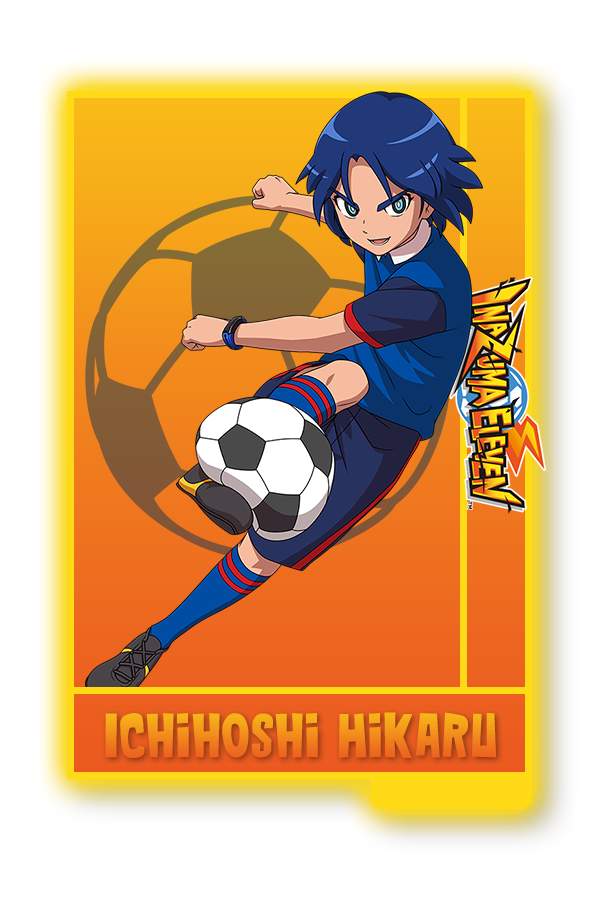
<style>
.page{position:relative;width:600px;height:900px;background:#ffffff}
.page>*{position:absolute;margin:0}
.t1{font:65.2px "TTG-Bold"}
</style>
<div class="page">
<p class="t1" style="left:105px;top:712px;width:392px;height:47px">Ichihoshi Hikaru</p>
</div>
